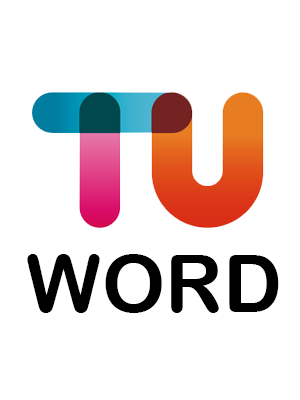
<style>
.page{position:relative;width:300px;height:400px;background:#ffffff}
.page>*{position:absolute;margin:0}
.t1{font:80px "ArialRoundedMTBold";color:#000000}
</style>
<div class="page">
<p class="t1" style="left:27px;top:254px;width:252px;height:59px">WORD</p>
</div>
